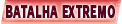
<style>
.page{position:relative;width:122px;height:24px;background:#57051f}
.page>*{position:absolute;margin:0}
.t1{font:16px "RodinNTLGPro-UB";letter-spacing:0.015em;color:#57051f;scale:0.62 1}
</style>
<div class="page">
<p class="t1" style="left:6px;top:5px;width:109px;height:14px">BATALHA EXTREMO</p>
</div>
